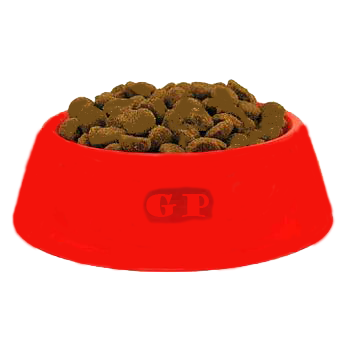
<style>
.page{position:relative;width:345px;height:350px;background:#ffffff}
.page>*{position:absolute;margin:0}
.t1{font:30px "GoudyStout";color:#f3130b}
</style>
<div class="page">
<p class="t1" style="left:146px;top:194px;width:63px;height:23px">GP</p>
</div>
